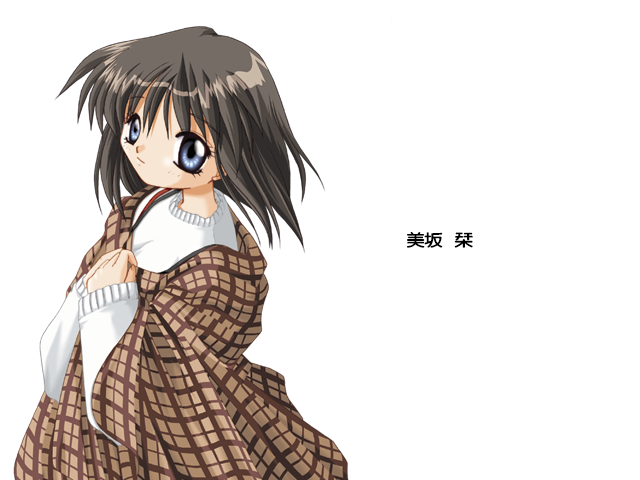
<style>
.page{position:relative;width:640px;height:480px;background:#ffffff}
.page>*{position:absolute;margin:0}
.t1{font:17px "FZY4K--GBK1-0";letter-spacing:-0.08em;color:#000000;scale:1.14 1}
</style>
<div class="page">
<p class="t1" style="left:406px;top:232px;width:67px;height:16px">美坂   栞</p>
</div>
